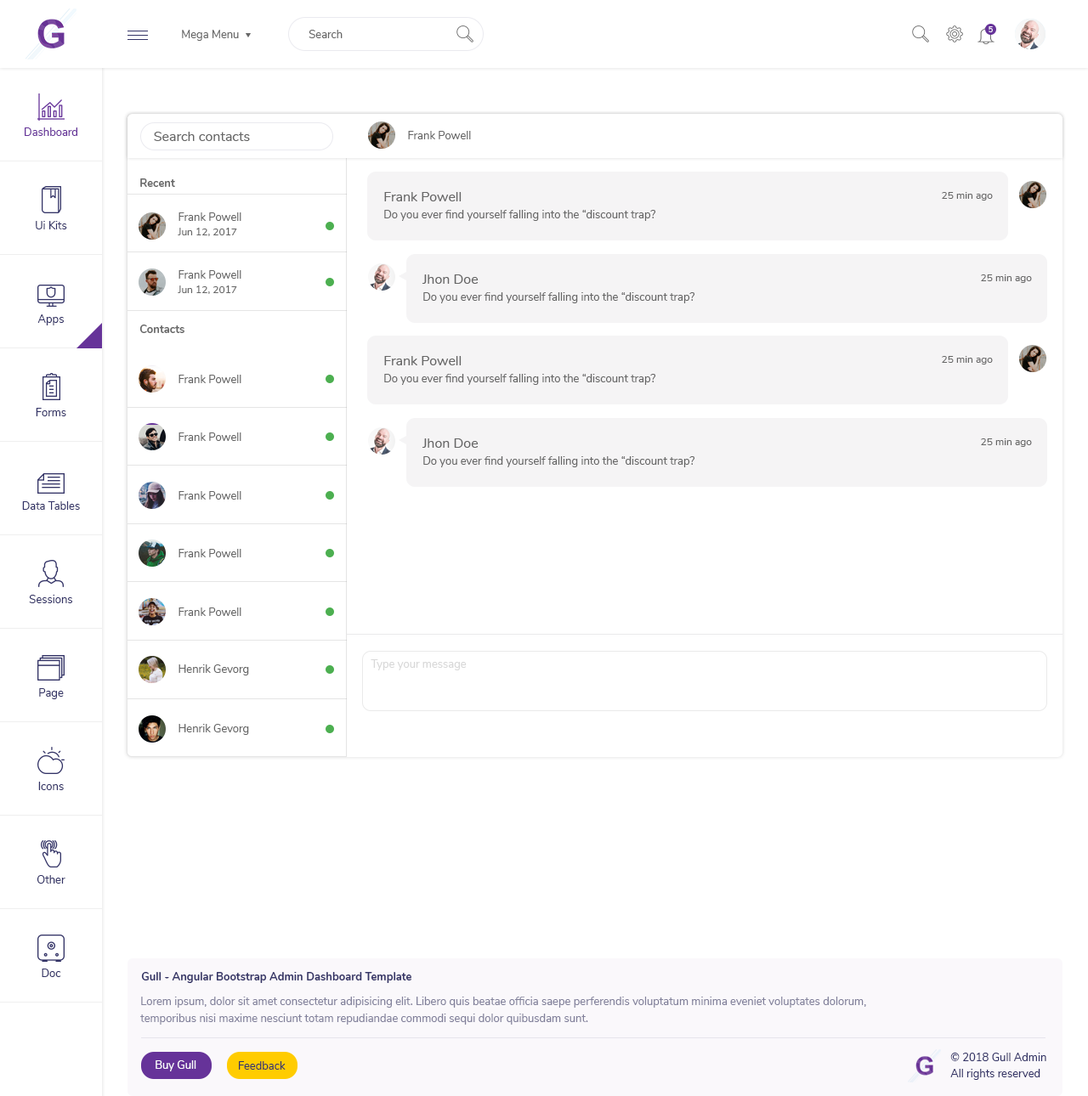
<style>
.page{position:relative;width:1088px;height:1096px;background:#ffffff}
.page>*{position:absolute;margin:0}
.t1{font:11px "Nunito-Regular";color:#666666}
.t2{font:7.6px "Nunito-SemiBold";color:#ffffff}
.t3{font:11px "Nunito-Regular";color:#663399}
.t4{font:13.6px "Nunito-Regular";color:#666666}
.t5{font:11px "Nunito-Bold";color:#666666}
.t6{font:10.2px "Nunito-Regular";color:#666666}
.t7{font:11px "Nunito-Regular";color:#333366}
.t8{font:11px "Nunito-Regular";color:#d8d8d8}
.t9{font:11px "Nunito-Bold";color:#333366}
.t10{font:11px/17px "Nunito-Regular";color:#82819b}
.t11{font:11px "Nunito-Regular";color:#ffffff}
</style>
<div class="page">
<p class="t1" style="left:182px;top:30px;width:57px;height:11px">Mega Menu</p>
<p class="t1" style="left:308px;top:30px;width:34px;height:8px">Search</p>
<p class="t2" style="left:988px;top:26px;width:5px;height:6px">5</p>
<p class="t3" style="left:25px;top:127px;width:52px;height:9px">Dashboard</p>
<p class="t4" style="left:154px;top:132px;width:96px;height:9px">Search contacts</p>
<p class="t1" style="left:408px;top:131px;width:63px;height:8px">Frank Powell</p>
<p class="t5" style="left:140px;top:178px;width:35px;height:9px">Recent</p>
<p class="t4" style="left:384px;top:192px;width:77px;height:9px">Frank Powell</p>
<p class="t6" style="left:942px;top:192px;width:51px;height:9px">25 min ago</p>
<p class="t1" style="left:384px;top:210px;width:272px;height:11px">Do you ever find yourself falling into the “discount trap?</p>
<p class="t7" style="left:36px;top:221px;width:31px;height:8px">Ui Kits</p>
<p class="t1" style="left:178px;top:212px;width:63px;height:9px">Frank Powell</p>
<p class="t6" style="left:178px;top:228px;width:59px;height:8px">Jun 12, 2017</p>
<p class="t1" style="left:178px;top:270px;width:63px;height:9px">Frank Powell</p>
<p class="t4" style="left:422px;top:274px;width:56px;height:10px">Jhon Doe</p>
<p class="t6" style="left:981px;top:274px;width:51px;height:9px">25 min ago</p>
<p class="t6" style="left:178px;top:286px;width:59px;height:8px">Jun 12, 2017</p>
<p class="t1" style="left:423px;top:292px;width:272px;height:11px">Do you ever find yourself falling into the “discount trap?</p>
<p class="t7" style="left:37px;top:314px;width:27px;height:11px">Apps</p>
<p class="t5" style="left:139px;top:325px;width:45px;height:8px">Contacts</p>
<p class="t4" style="left:384px;top:356px;width:77px;height:9px">Frank Powell</p>
<p class="t6" style="left:942px;top:356px;width:51px;height:9px">25 min ago</p>
<p class="t1" style="left:178px;top:375px;width:63px;height:8px">Frank Powell</p>
<p class="t1" style="left:384px;top:374px;width:272px;height:11px">Do you ever find yourself falling into the “discount trap?</p>
<p class="t7" style="left:36px;top:408px;width:30px;height:8px">Forms</p>
<p class="t1" style="left:178px;top:433px;width:63px;height:8px">Frank Powell</p>
<p class="t4" style="left:422px;top:438px;width:56px;height:10px">Jhon Doe</p>
<p class="t6" style="left:981px;top:438px;width:51px;height:9px">25 min ago</p>
<p class="t1" style="left:423px;top:456px;width:272px;height:11px">Do you ever find yourself falling into the “discount trap?</p>
<p class="t1" style="left:178px;top:491px;width:63px;height:9px">Frank Powell</p>
<p class="t7" style="left:22px;top:501px;width:58px;height:9px">Data Tables</p>
<p class="t1" style="left:178px;top:549px;width:63px;height:8px">Frank Powell</p>
<p class="t7" style="left:29px;top:595px;width:43px;height:8px">Sessions</p>
<p class="t1" style="left:178px;top:608px;width:63px;height:8px">Frank Powell</p>
<p class="t1" style="left:178px;top:665px;width:71px;height:11px">Henrik Gevorg</p>
<p class="t8" style="left:371px;top:659px;width:96px;height:11px">Type your message</p>
<p class="t7" style="left:39px;top:688px;width:25px;height:11px">Page</p>
<p class="t1" style="left:178px;top:724px;width:71px;height:11px">Henrik Gevorg</p>
<p class="t7" style="left:38px;top:782px;width:26px;height:8px">Icons</p>
<p class="t7" style="left:37px;top:875px;width:28px;height:9px">Other</p>
<p class="t7" style="left:42px;top:969px;width:19px;height:8px">Doc</p>
<p class="t9" style="left:141px;top:972px;width:270px;height:11px">Gull - Angular Bootstrap Admin Dashboard Template</p>
<p class="t10" style="left:140px;top:997px;width:726px;height:28px">Lorem ipsum, dolor sit amet consectetur adipisicing elit. Libero quis beatae officia saepe perferendis voluptatum minima eveniet voluptates dolorum, <br>temporibus nisi maxime nesciunt totam repudiandae commodi sequi dolor quibusdam sunt.</p>
<p class="t11" style="left:156px;top:1061px;width:40px;height:11px">Buy Gull</p>
<p class="t7" style="left:239px;top:1061px;width:47px;height:9px">Feedback</p>
<p class="t7" style="left:950px;top:1053px;width:96px;height:8px">© 2018 Gull Admin</p>
<p class="t7" style="left:950px;top:1069px;width:90px;height:11px">All rights reserved</p>
</div>
